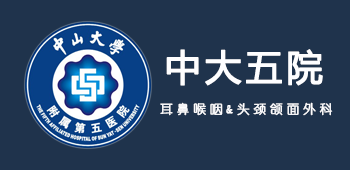
<style>
.page{position:relative;width:350px;height:170px;background:#1f334c}
.page>*{position:absolute;margin:0}
.t1{font:36.1px "MicrosoftYaHei";letter-spacing:0.1em;color:#fefeff;font-weight:bold}
.t2{font:12.5px "YouYuan";letter-spacing:0.3em;color:#fefeff;font-weight:bold}
</style>
<div class="page">
<p class="t1" style="left:166px;top:49px;width:157px;height:37px">中大五院</p>
<p class="t2" style="left:160px;top:102px;width:173px;height:14px">耳鼻喉咽&amp;头颈颌面外科</p>
</div>
